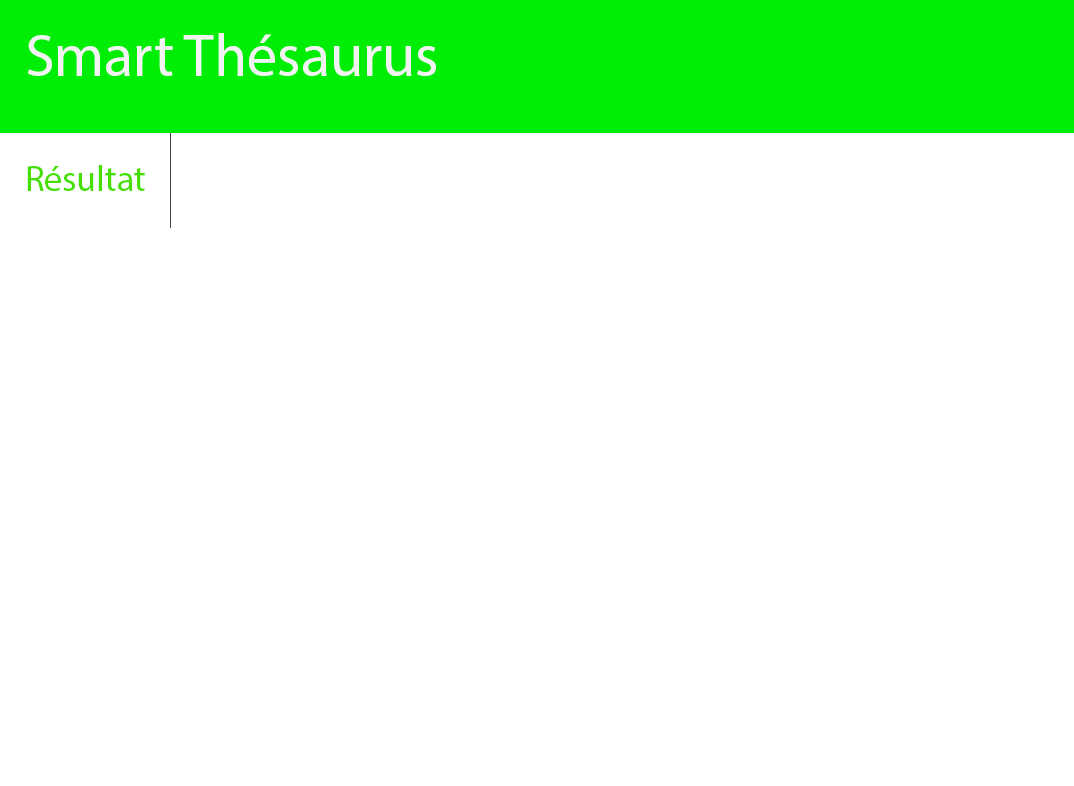
<style>
.page{position:relative;width:1074px;height:786px;background:#ffffff}
.page>*{position:absolute;margin:0}
.t1{font:60px "MyriadPro-Regular";color:#f4f3f3}
.t2{font:36px "MyriadPro-Regular";color:#45e002}
</style>
<div class="page">
<p class="t1" style="left:28px;top:33px;width:408px;height:43px">Smart Thésaurus</p>
<p class="t2" style="left:27px;top:165px;width:118px;height:26px">Résultat</p>
</div>
